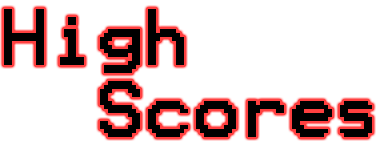
<style>
.page{position:relative;width:380px;height:142px;background:#ffffff}
.page>*{position:absolute;margin:0}
.t1{font:64px "Terminal";color:#000000}
</style>
<div class="page">
<p class="t1" style="left:4px;top:9px;width:180px;height:64px">High</p>
<p class="t1" style="left:100px;top:81px;width:272px;height:56px">Scores</p>
</div>
